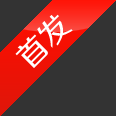
<style>
.page{position:relative;width:116px;height:116px;background:#333333}
.page>*{position:absolute;margin:0}
.t1{font:30px "FZZZHUNHJW--GB1-0";color:#ffffff}
</style>
<div class="page">
<p class="t1" style="left:15px;top:14px;width:58px;height:54px;rotate:-45deg">首发</p>
</div>
